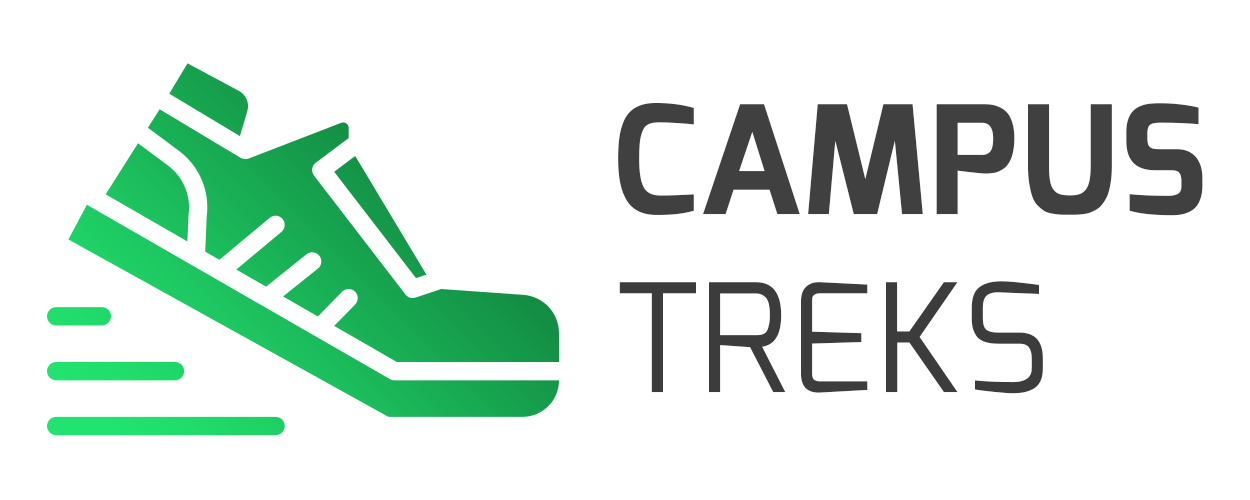
<style>
.page{position:relative;width:1250px;height:500px;background:#ffffff}
.page>*{position:absolute;margin:0}
.t1{font:150px "Mina-Bold";color:#404040}
.t2{font:150px "Mina-Regular";color:#3c3c3c}
</style>
<div class="page">
<p class="t1" style="left:618px;top:103px;width:585px;height:113px">CAMPUS</p>
<p class="t2" style="left:619px;top:281px;width:424px;height:113px">TREKS</p>
</div>
